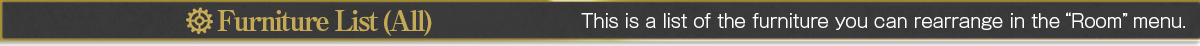
<style>
.page{position:relative;width:1200px;height:46px}
.page>*{position:absolute;margin:0}
.t1{font:28px "RyuminPro-ExBold";letter-spacing:-0.08em;color:#c4a956}
.t2{font:18px "GothicMB101Pro-Light";color:#ffffff}
</style>
<div class="page">
<p class="t1" style="left:217px;top:10px;width:215px;height:26px">Furniture List (All)</p>
<p class="t2" style="left:581px;top:12px;width:604px;height:18px">This is a list of the furniture you can rearrange in the“Room”menu.</p>
</div>
